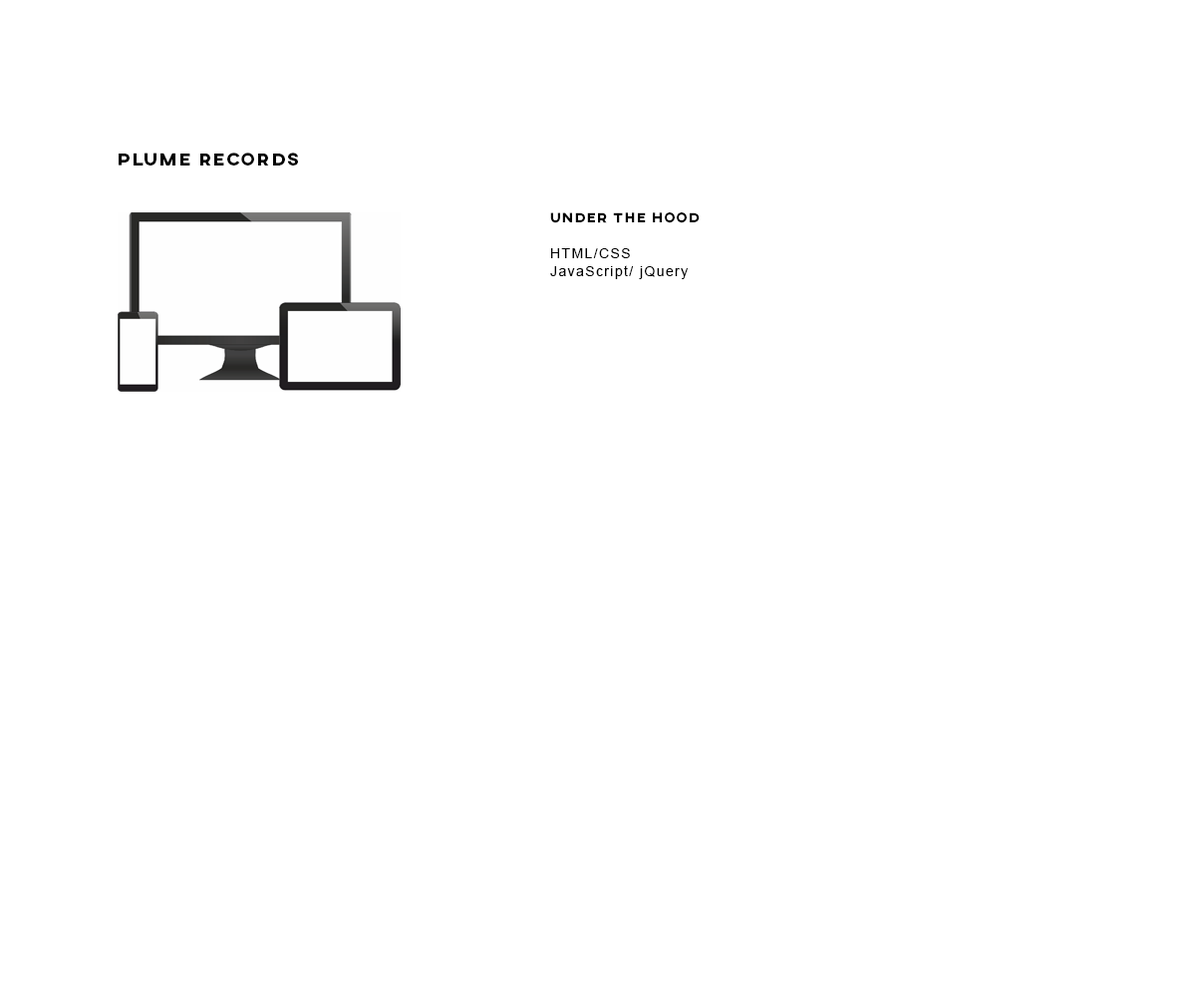
<style>
.page{position:relative;width:1196px;height:997px;background:#ffffff}
.page>*{position:absolute;margin:0}
.t1{font:17.9px "AXIS-ExtraBold";letter-spacing:0.1em;color:#020202}
.t2{font:14px/17.9px "ArialMT";letter-spacing:0.1em;color:#020202}
.t3{font:14px/17.9px "AXIS-ExtraBold";letter-spacing:0.1em;color:#020202}
</style>
<div class="page">
<p class="t1" style="left:119px;top:153px;width:179px;height:12px">Plume Records</p>
<p class="t2" style="left:550px;top:212px;width:150px;height:67px"><span class="t3">Under the hood<br></span><br>HTML/CSS<br>JavaScript/ jQuery</p>
</div>
